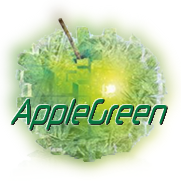
<style>
.page{position:relative;width:181px;height:181px}
.page>*{position:absolute;margin:0}
.t1{font:36.9px "NeuropolXFree";color:#04783f;scale:0.5 1}
</style>
<div class="page">
<p class="t1" style="left:11px;top:99px;width:156px;height:31px">AppleGreen</p>
<p class="t1" style="left:11px;top:99px;width:156px;height:31px">AppleGreen</p>
<p class="t1" style="left:11px;top:99px;width:156px;height:31px">AppleGreen</p>
</div>
